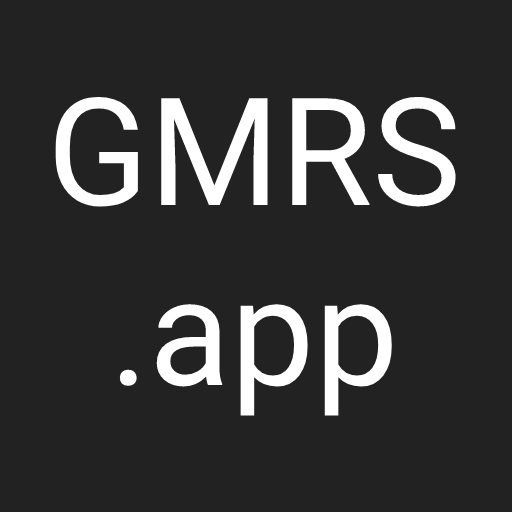
<style>
.page{position:relative;width:512px;height:512px;background:#222222}
.page>*{position:absolute;margin:0}
.t1{font:150px "Roboto-Regular";color:#ffffff}
</style>
<div class="page">
<p class="t1" style="left:55px;top:96px;width:401px;height:320px;text-align:center">GMRS<br>.app</p>
</div>
